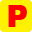
<style>
.page{position:relative;width:32px;height:32px;background:#fff200}
.page>*{position:absolute;margin:0}
.t1{font:30px "Arial-Black";letter-spacing:0.025em;color:#ff0000}
</style>
<div class="page">
<p class="t1" style="left:8px;top:5px;width:19px;height:22px">P</p>
</div>
